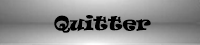
<style>
.page{position:relative;width:200px;height:45px}
.page>*{position:absolute;margin:0}
.t1{font:18.7px "Ravie";color:#000000}
</style>
<div class="page">
<p class="t1" style="left:54px;top:15px;width:97px;height:18px">Quitter</p>
</div>
